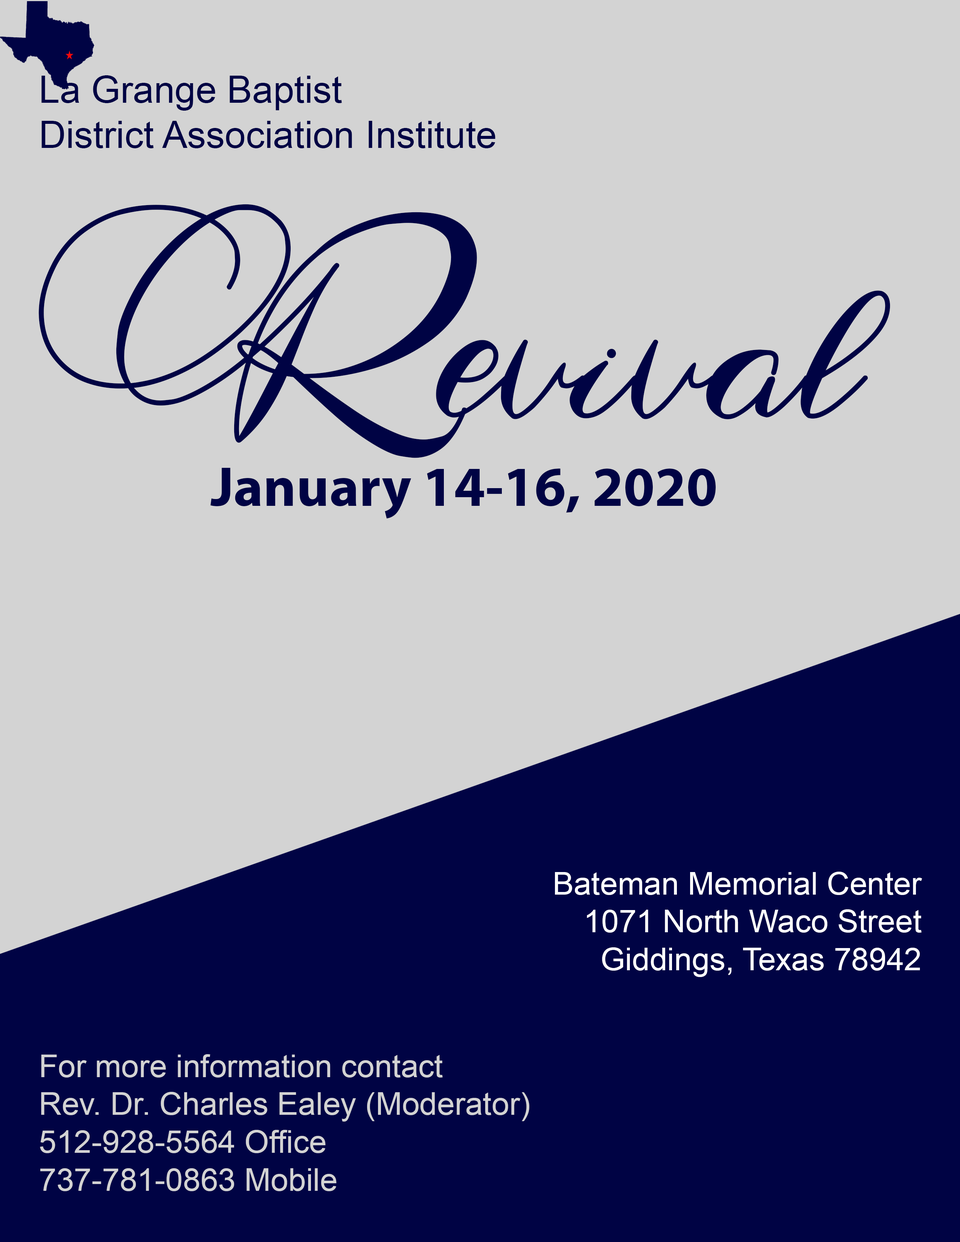
<style>
.page{position:relative;width:960px;height:1242px;background:#d3d3d3}
.page>*{position:absolute;margin:0}
.t1{font:37.6px "ArialMT";color:#000344}
.t2{font:269.8px "Antika";color:#000344}
.t3{font:56.5px "MyriadPro-Bold";color:#000344}
.t4{font:31.6px "ArialMT";color:#ffffff}
.t5{font:31.6px "ArialMT";color:#d3d3d3}
</style>
<div class="page">
<p class="t1" style="left:41px;top:75px;width:454px;height:73px">La Grange Baptist <br>District Association Institute</p>
<p class="t2" style="left:39px;top:204px;width:851px;height:254px">Revival</p>
<p class="t3" style="left:210px;top:468px;width:506px;height:51px">January 14-16, 2020</p>
<p class="t4" style="left:555px;top:872px;width:367px;height:105px;text-align:right">Bateman Memorial Center<br>1071 North Waco Street <br>Giddings, Texas 78942</p>
<p class="t5" style="left:40px;top:1054px;width:489px;height:137px">For more information contact <br>Rev. Dr. Charles Ealey (Moderator) <br>512-928-5564 Office<br>737-781-0863 Mobile</p>
</div>
